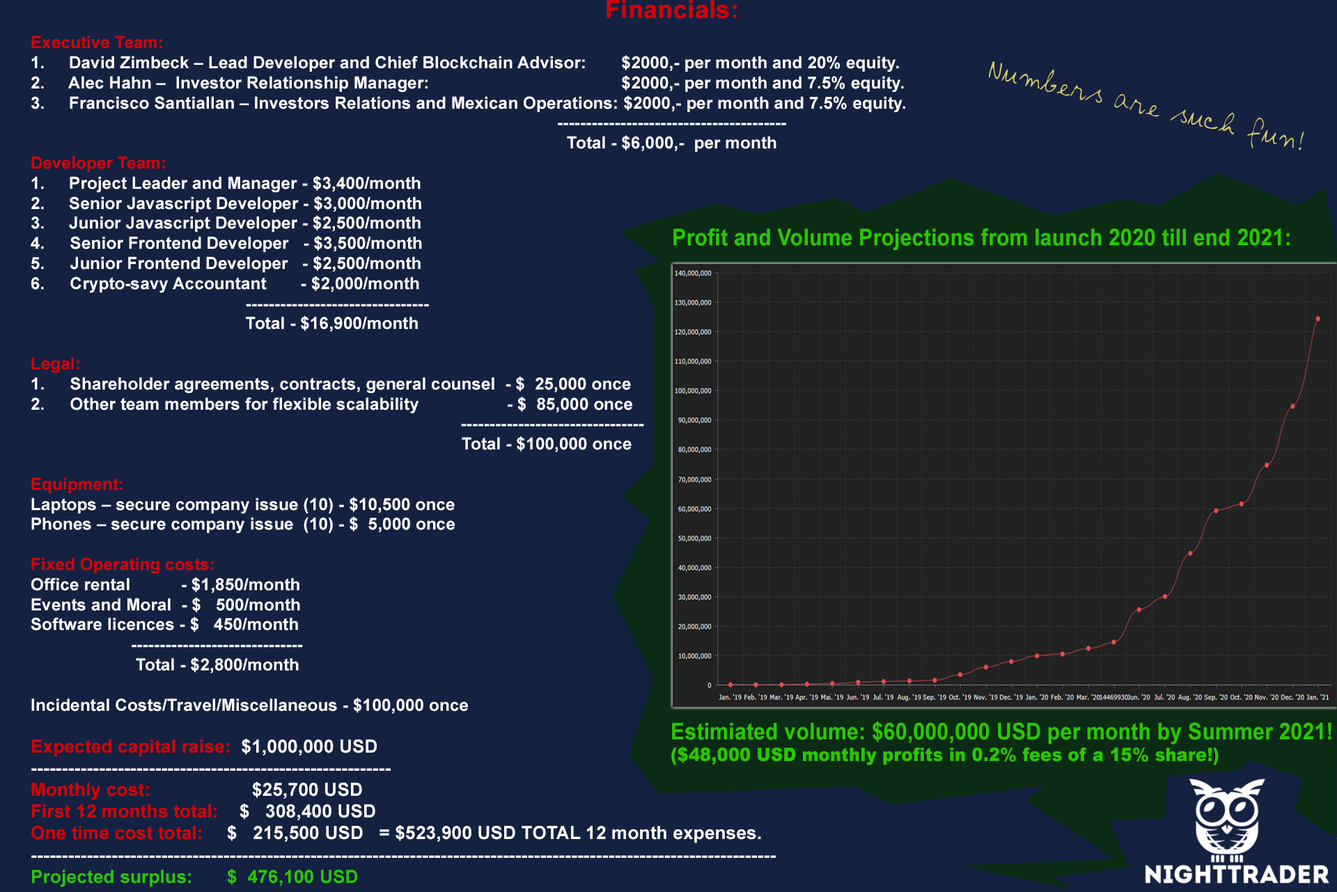
<style>
.page{position:relative;width:1337px;height:892px;background:#142141}
.page>*{position:absolute;margin:0}
.t1{font:25.1px "Arial-BoldMT";letter-spacing:0.01em;color:#d70202}
.t2{font:16.7px "Arial-BoldMT";letter-spacing:0.01em;color:#ffffff}
.t3{font:16.7px "Arial-BoldMT";letter-spacing:0.01em;color:#d70202}
.t4{font:18.1px "Arial-BoldMT";letter-spacing:0.01em;color:#d70202}
.t5{font:18.1px "Arial-BoldMT";letter-spacing:0.01em;color:#ffffff}
.t6{font:18.1px "Arial-BoldMT";letter-spacing:0.01em;color:#2ac700}
.t7{font:25.3px "Aljo";letter-spacing:0.01em;color:#cfc968}
.t8{font:23px "Arial-BoldMT";letter-spacing:0.01em;color:#2ac700;scale:0.91 1}
.t9{font:18.4px "Arial-Black";letter-spacing:0.01em;color:#2ac700;scale:0.91 1}
</style>
<div class="page">
<p class="t1" style="left:607px;top:0px;width:130px;height:19px">Financials:</p>
<p class="t2" style="left:31px;top:36px;width:875px;height:851px"><span class="t3">Executive Team:<br></span>1.     David Zimbeck – Lead Developer and Chief Blockchain Advisor:      $2000,- per month and 20% equity.<br>2.     Alec Hahn –  Investor Relationship Manager:              $2000,- per month and 7.5% equity.<br>3.     Francisco Santiallan – Investors Relations and Mexican Operations: $2000,- per month and 7.5% equity.<br>                     ----------------------------------------<br>                        Total - $6,000,-  per month<br><span class="t3">Developer Team:<br></span>1.     Project Leader and Manager - $3,400/month<br>2.     Senior Javascript Developer - $3,000/month<br>3.     Junior Javascript Developer - $2,500/month<br>4.    Senior Frontend Developer   - $3,500/month<br>5.    Junior Frontend Developer   - $2,500/month<br>6.     Crypto-savy Accountant      - $2,000/month<br>           --------------------------------<br>           Total - $16,900/month<br><br><span class="t3">Legal:<br></span>1.     Shareholder agreements, contracts, general counsel  - $  25,000 once<br>2.     Other team members for flexible scalability     - $  85,000 once<br>                        --------------------------------<br>                  Total - $100,000 once<br><br><span class="t3">Equipment:<br></span>Laptops – secure company issue (10) - $10,500 once<br>Phones – secure company issue  (10) - $  5,000 once<br><br><span class="t3">Fixed Operating costs:<br></span>Office rental   - $1,850/month<br>Events and Moral  - $   500/month<br>Software licences - $   450/month<br>    ------------------------------<br>     Total - $2,800/month<br><br>Incidental Costs/Travel/Miscellaneous - $100,000 once<br><br><span class="t4">Expected capital raise: </span><span class="t5"> $1,000,000 USD<br>----------------------------------------------------------<br></span><span class="t4">Monthly cost: </span><span class="t5">        $25,700 USD<br></span><span class="t4">First 12 months total:  </span><span class="t5">  $   308,400 USD<br></span><span class="t4">One time cost total:</span><span class="t5">     $   215,500 USD   = $523,900 USD TOTAL 12 month expenses.<br>------------------------------------------------------------------------------------------------------------------------<br></span><span class="t6">Projected surplus:       $  476,100 USD</span></p>
<p class="t7" style="left:989px;top:61px;width:316px;height:89px;rotate:13deg">Numbers are such fun!</p>
<p class="t8" style="left:674px;top:228px;width:616px;height:22px">Profit and Volume Projections from launch 2020 till end 2021:</p>
<p class="t8" style="left:671px;top:721px;width:661px;height:44px">Estimiated volume: $60,000,000 USD per month by Summer 2021!<br><span class="t9">($48,000 USD monthly profits in 0.2% fees of a 15% share!)</span></p>
</div>
